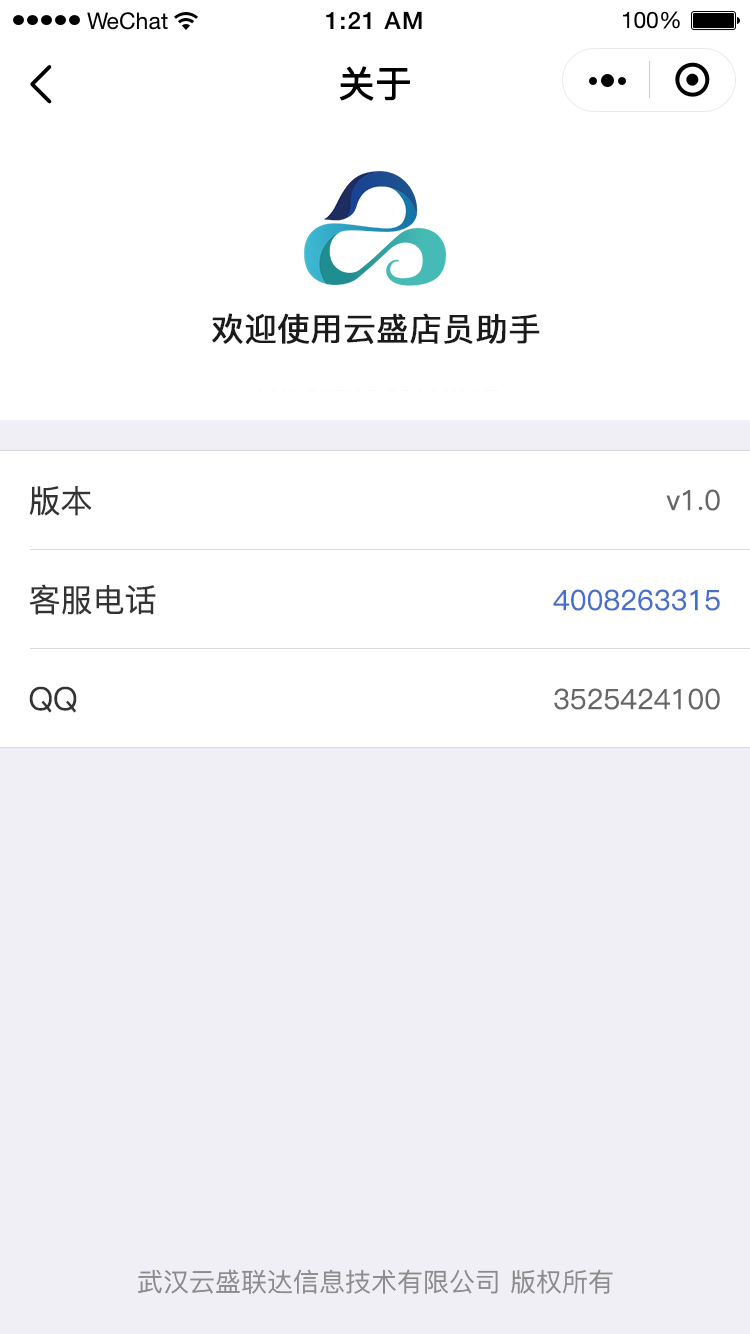
<style>
.page{position:relative;width:750px;height:1334px;background:#ffffff}
.page>*{position:absolute;margin:0}
.t1{font:36px "PingFang-SC-Medium";color:#000000;font-weight:bold}
.t2{font:32px "PingFang-SC-Medium";color:#1a1a1a;font-weight:bold}
.t3{font:32px "PingFang-SC-Medium";color:#333333}
.t4{font:28px "PingFang-SC-Medium";color:#666666}
.t5{font:28px "PingFang-SC-Medium";color:#476ec9}
.t6{font:26px "PingFang-SC-Medium";color:#8c8c8c}
</style>
<div class="page">
<p class="t1" style="left:340px;top:66px;width:70px;height:35px">关于</p>
<p class="t2" style="left:212px;top:313px;width:328px;height:31px">欢迎使用云盛店员助手</p>
<p class="t3" style="left:29px;top:486px;width:63px;height:30px">版本</p>
<p class="t4" style="left:666px;top:489px;width:54px;height:22px">v1.0</p>
<p class="t3" style="left:29px;top:584px;width:127px;height:31px">客服电话</p>
<p class="t5" style="left:553px;top:589px;width:167px;height:22px">4008263315</p>
<p class="t3" style="left:29px;top:686px;width:48px;height:27px">QQ</p>
<p class="t4" style="left:554px;top:688px;width:166px;height:22px">3525424100</p>
<p class="t6" style="left:138px;top:1269px;width:475px;height:25px">武汉云盛联达信息技术有限公司 版权所有</p>
</div>
